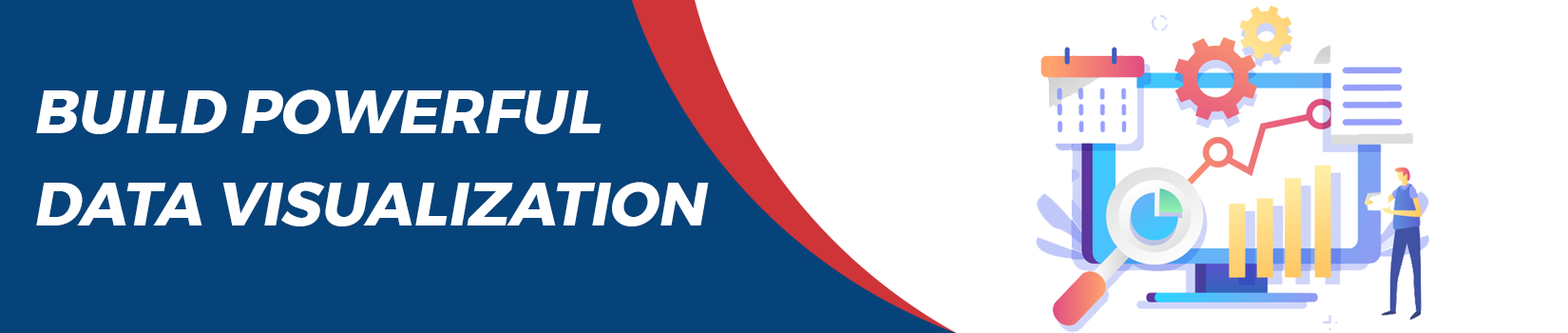
<style>
.page{position:relative;width:1568px;height:333px;background:#ffffff}
.page>*{position:absolute;margin:0}
.t1{font:61.4px/92.1px "Montserrat-Bold";color:#ffffff;text-transform:uppercase;font-style:italic}
</style>
<div class="page">
<p class="t1" style="left:36px;top:89px;width:673px;height:137px">BUILD POWERFUL<br>DATA VISUALIZATION</p>
</div>
